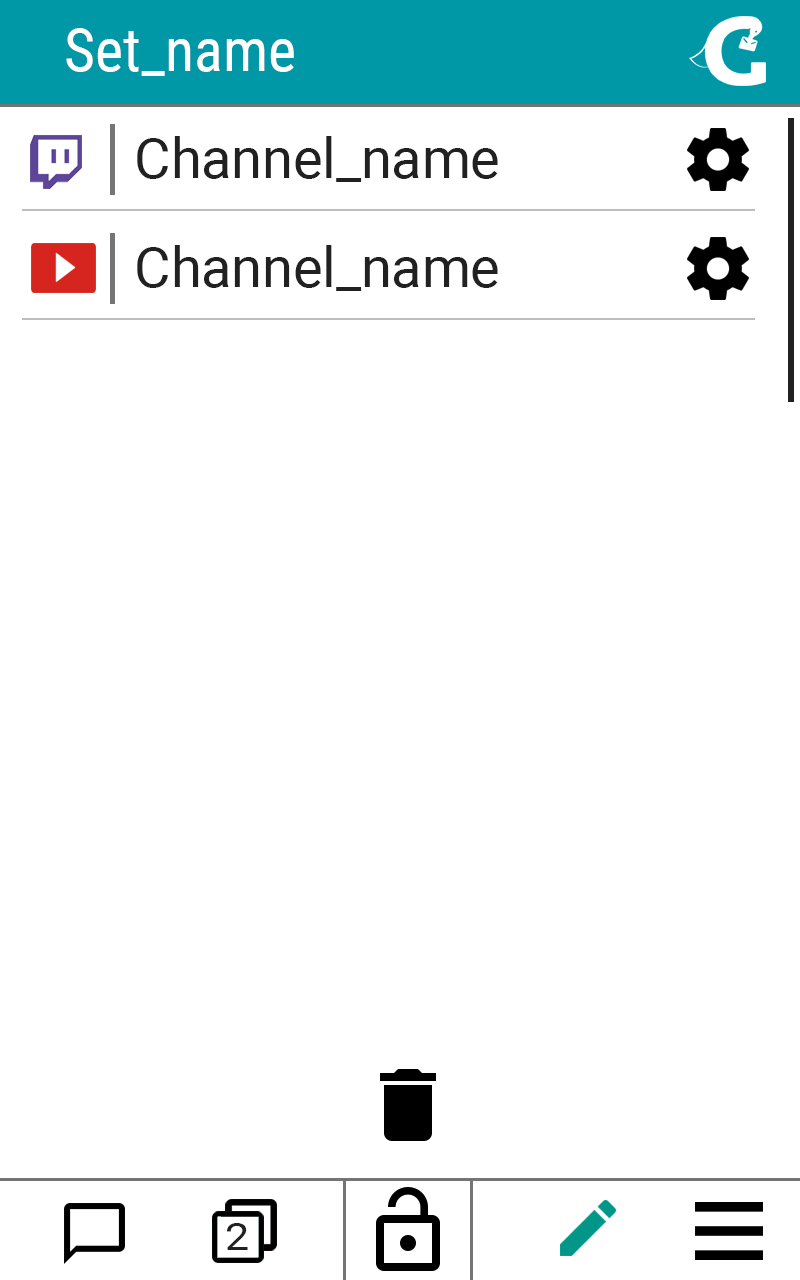
<style>
.page{position:relative;width:800px;height:1280px;background:#ffffff}
.page>*{position:absolute;margin:0}
.t1{font:60px "RobotoCondensed-Regular";color:#ffffff}
.t2{font:55.5px "Roboto-Regular";color:#212121}
.t3{font:37.5px "Roboto-Regular";color:#212121;scale:1.16 1}
</style>
<div class="page">
<p class="t1" style="left:66px;top:28px;width:228px;height:48px">Set_name</p>
<p class="t2" style="left:137px;top:136px;width:361px;height:46px">Channel_name</p>
<p class="t2" style="left:137px;top:245px;width:361px;height:46px">Channel_name</p>
<p class="t3" style="left:227px;top:1223px;width:21px;height:27px">2</p>
</div>
